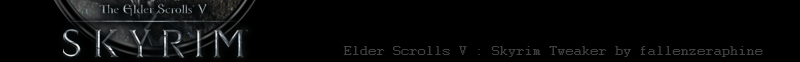
<style>
.page{position:relative;width:800px;height:62px;background:#000000}
.page>*{position:absolute;margin:0}
.t1{font:14px "Courier";letter-spacing:0.025em;color:#404040}
</style>
<div class="page">
<p class="t1" style="left:343px;top:46px;width:420px;height:11px">Elder Scrolls V : Skyrim Tweaker by fallenzeraphine</p>
</div>
